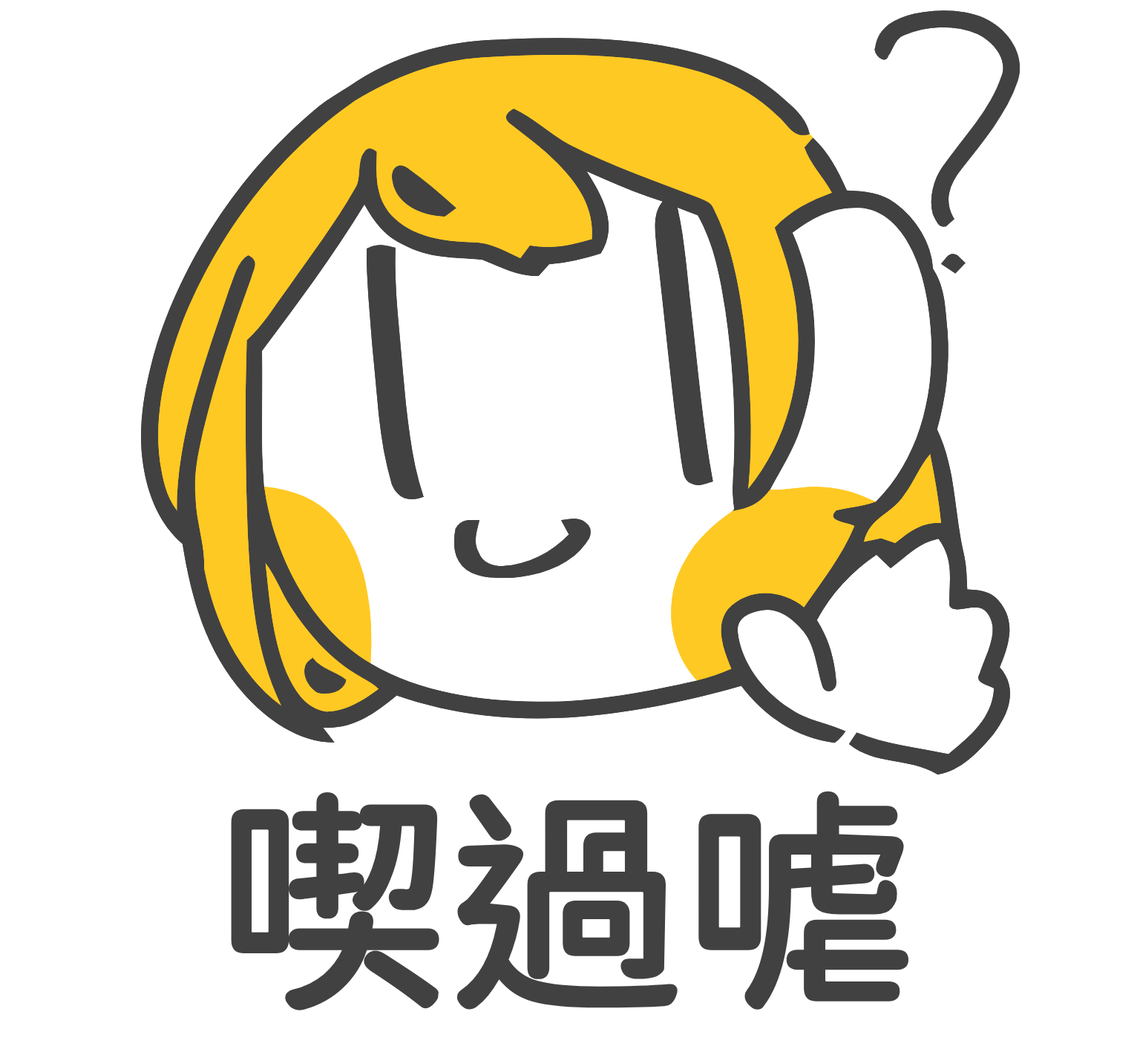
<style>
.page{position:relative;width:1140px;height:1046px;background:#ffffff}
.page>*{position:absolute;margin:0}
.t1{font:233.7px "TaiwanPearl-SemiBold"}
</style>
<div class="page">
<p class="t1" style="left:211px;top:772px;width:717px;height:258px">喫過㖸</p>
</div>
